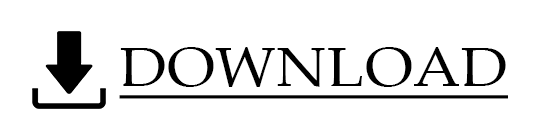
<style>
.page{position:relative;width:550px;height:140px;background:#ffffff}
.page>*{position:absolute;margin:0}
.t1{font:56px "PalatinoLinotype-Roman";color:#000000;text-decoration:underline;scale:1.09 1}
</style>
<div class="page">
<p class="t1" style="left:119px;top:47px;width:389px;height:52px">DOWNLOAD</p>
</div>
